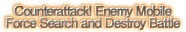
<style>
.page{position:relative;width:186px;height:32px}
.page>*{position:absolute;margin:0}
.t1{font:13px/12px "FutoGoB101Pr5-Bold";letter-spacing:-0.08em;color:#7f6951;font-weight:bold}
</style>
<div class="page">
<p class="t1" style="left:6px;top:5px;width:175px;height:25px;text-align:center">Counterattack! Enemy Mobile<br>Force Search and Destroy Battle</p>
</div>
